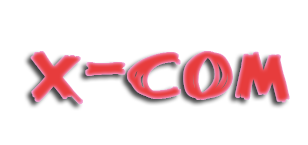
<style>
.page{position:relative;width:308px;height:145px;background:#ffffff}
.page>*{position:absolute;margin:0}
.t1{font:79.3px "BillieBarred";font-variant:small-caps;font-weight:bold}
</style>
<div class="page">
<p class="t1" style="left:30px;top:51px;width:260px;height:53px">x-com</p>
</div>
